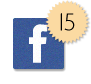
<style>
.page{position:relative;width:91px;height:84px;background:#ffffff}
.page>*{position:absolute;margin:0}
.t1{font:25px "LondonMM";color:#000000}
</style>
<div class="page">
<p class="t1" style="left:60px;top:13px;width:15px;height:18px">15</p>
</div>
